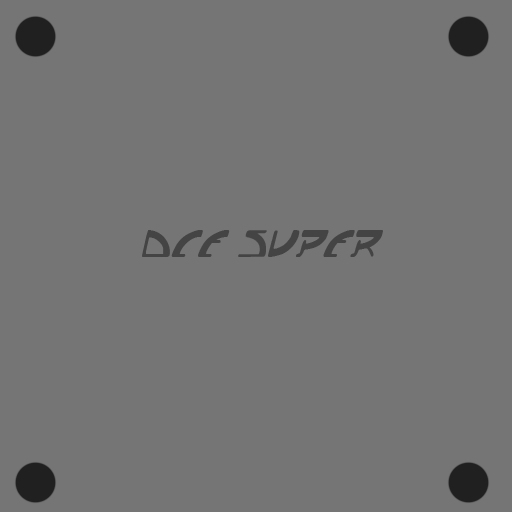
<style>
.page{position:relative;width:512px;height:512px;background:#757575}
.page>*{position:absolute;margin:0}
.t1{font:26.8px "AnimePornstar";color:#444444}
</style>
<div class="page">
<p class="t1" style="left:142px;top:230px;width:241px;height:27px">DCE Super</p>
</div>
